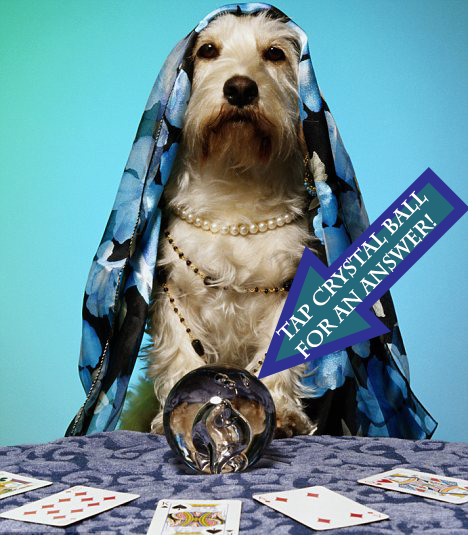
<style>
.page{position:relative;width:468px;height:535px}
.page>*{position:absolute;margin:0}
.t1{font:20.4px "CharlemagneStd-Bold";color:#ffffff}
</style>
<div class="page">
<p class="t1" style="left:275px;top:190px;width:162px;height:170px;rotate:-46deg">Tap Crystal Ball <br>For An Answer!</p>
</div>
